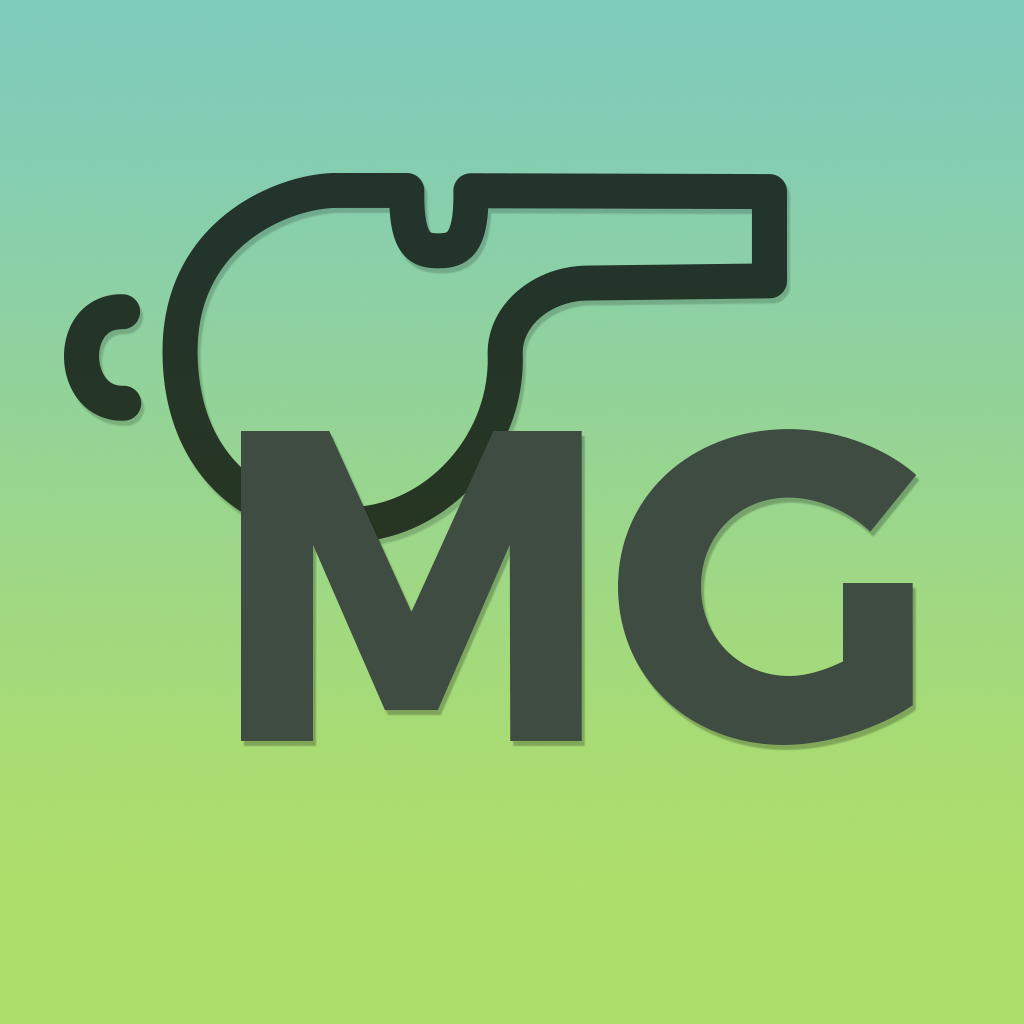
<style>
.page{position:relative;width:1024px;height:1024px}
.page>*{position:absolute;margin:0}
.t1{font:442.7px "Montserrat-Bold";letter-spacing:-0.01em;color:#3f4c41}
</style>
<div class="page">
<p class="t1" style="left:241px;top:429px;width:676px;height:316px">MG</p>
</div>
